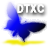
<style>
.page{position:relative;width:48px;height:48px;background:#ffffff}
.page>*{position:absolute;margin:0}
.t1{font:10px "HGSSoeiKakugothicUB";color:#fafafa;font-weight:bold;scale:1.1 1}
</style>
<div class="page">
<p class="t1" style="left:17px;top:4px;width:27px;height:9px">DTXC</p>
</div>
